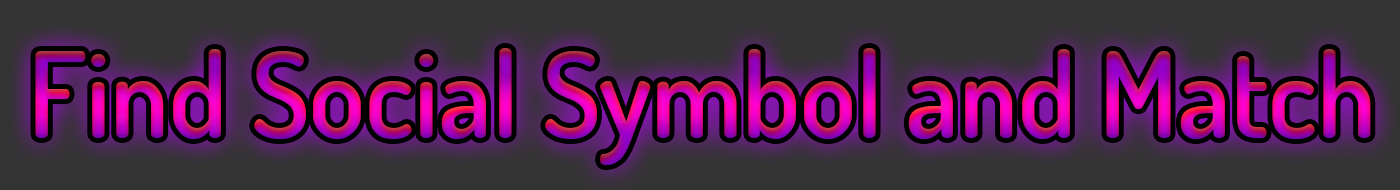
<style>
.page{position:relative;width:1400px;height:190px;background:#333333}
.page>*{position:absolute;margin:0}
.t1{font:118.8px "Dosis-SemiBold";scale:0.97 1}
</style>
<div class="page">
<p class="t1" style="left:35px;top:48px;width:1336px;height:117px">Find Social Symbol and Match</p>
</div>
